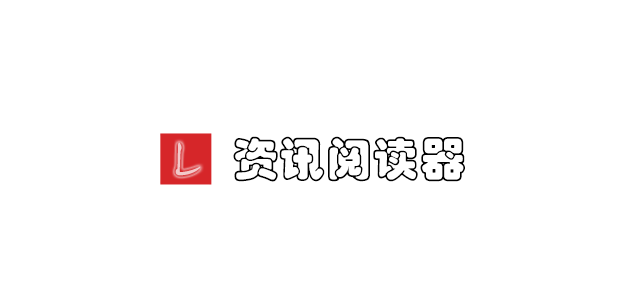
<style>
.page{position:relative;width:620px;height:300px;background:#ffffff}
.page>*{position:absolute;margin:0}
.t1{font:46.7px "STCaiyun";color:#000000}
.t2{font:46.7px "SketchFlowPrint";color:#f2c9ca}
</style>
<div class="page">
<p class="t1" style="left:233px;top:136px;width:232px;height:46px">资讯阅读器</p>
<p class="t2" style="left:175px;top:142px;width:26px;height:34px">L</p>
</div>
